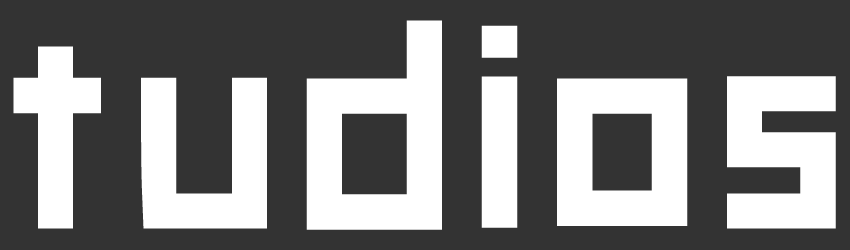
<style>
.page{position:relative;width:850px;height:250px;background:#333333}
.page>*{position:absolute;margin:0}
.t1{font:400px "RecinoStudio-Regular";color:#ffffff}
</style>
<div class="page">
<p class="t1" style="left:13px;top:20px;width:823px;height:210px">tudios</p>
</div>
